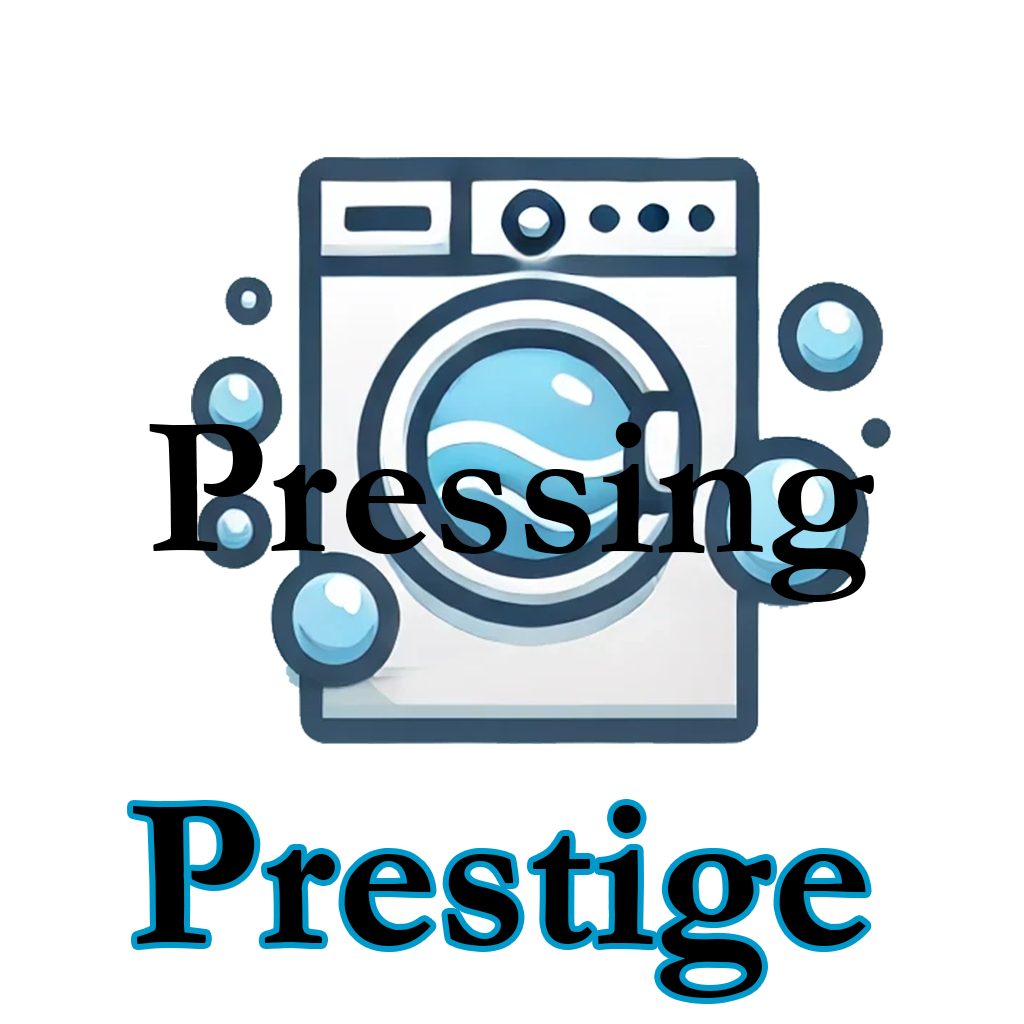
<style>
.page{position:relative;width:1024px;height:1024px;background:#ffffff}
.page>*{position:absolute;margin:0}
.t1{font:200px "Garamond-Bold";color:#000000}
.t2{font:215.4px "Garamond-Bold";color:#000000}
</style>
<div class="page">
<p class="t1" style="left:149px;top:422px;width:725px;height:180px">Pressing</p>
<p class="t2" style="left:133px;top:805px;width:733px;height:193px">Prestige</p>
</div>
